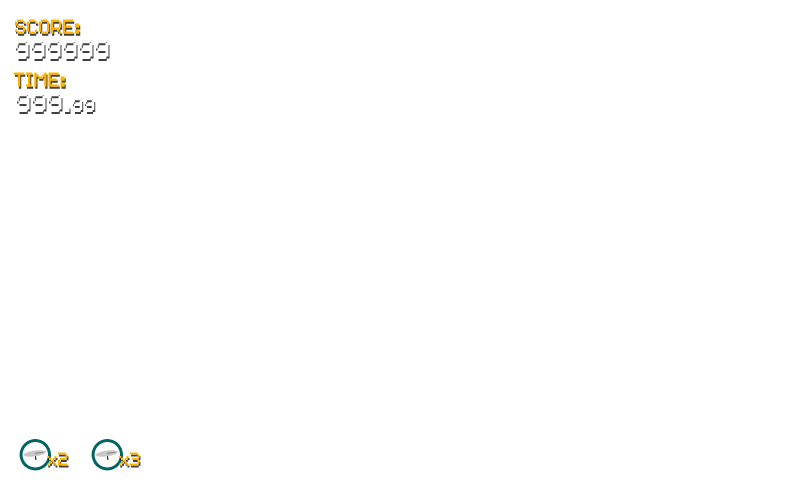
<style>
.page{position:relative;width:800px;height:480px;background:#ffffff}
.page>*{position:absolute;margin:0}
.t1{font:18px "Volter(Goldfish)-Regular";color:#ffb300}
.t2{font:24px "Volter(Goldfish)-Regular";color:#ffffff}
.t3{font:16.4px "Volter(Goldfish)-Regular";color:#ffb300}
</style>
<div class="page">
<p class="t1" style="left:15px;top:19px;width:65px;height:15px">SCORE:</p>
<p class="t2" style="left:15px;top:40px;width:94px;height:19px">999999</p>
<p class="t1" style="left:14px;top:72px;width:51px;height:15px">TIME:</p>
<p class="t3" style="left:47px;top:452px;width:21px;height:14px">x2</p>
<p class="t3" style="left:119px;top:452px;width:21px;height:14px">x3</p>
</div>
